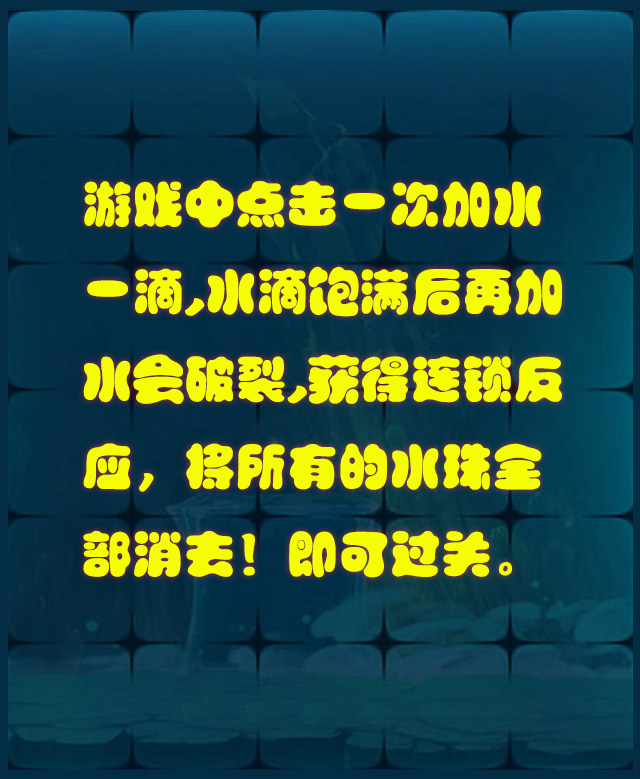
<style>
.page{position:relative;width:640px;height:779px}
.page>*{position:absolute;margin:0}
.t1{font:50px "FZPTYJW--GB1-0";color:#f4fd02;font-weight:bold}
</style>
<div class="page">
<p class="t1" style="left:83px;top:180px;width:479px;height:398px">游戏中点击一次加水<br>一滴,水滴饱满后再加<br>水会破裂,获得连锁反<br>应，将所有的水珠全<br>部消去！即可过关。</p>
</div>
